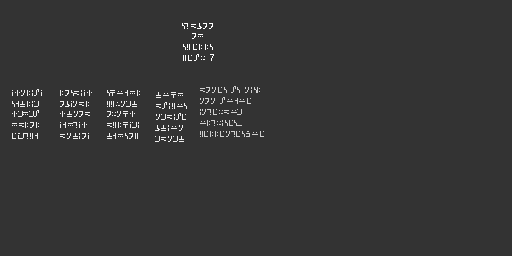
<style>
.page{position:relative;width:512px;height:256px;background:#333333}
.page>*{position:absolute;margin:0}
.t1{font:9px "SGARounded";letter-spacing:-0.02em;color:#ffffff}
.t2{font:9px "Small Fonts";letter-spacing:-0.02em;color:#ffffff}
.t3{font:9px "SGARounded";letter-spacing:-0.02em;color:#efefef}
.t4{font:9px "SGARounded";letter-spacing:-0.02em;color:#d0d0d0}
</style>
<div class="page">
<p class="t1" style="left:182px;top:23px;width:32px;height:38px;text-align:center">StdBoo<br>of <br>Spells<br>Year <span class="t2">7</span></p>
<p class="t3" style="left:12px;top:89px;width:30px;height:50px">jknliajsgvlimkmfmafdlolejmtpgkk</p>
<p class="t4" style="left:200px;top:86px;width:64px;height:51px">Donec ac nisl non augue interdum ultrices. Pellentesque vel ipsum</p>
<p class="t3" style="left:60px;top:90px;width:32px;height:49px">losdijkobjndlkvnodjgftjkdnviojnrj</p>
<p class="t3" style="left:107px;top:90px;width:33px;height:49px">shugflppwnmvornhkdplhjmivgfsoylg</p>
<p class="t3" style="left:155px;top:92px;width:32px;height:50px">vuhfdaipucnmdiaebviunmdnmvc</p>
</div>
